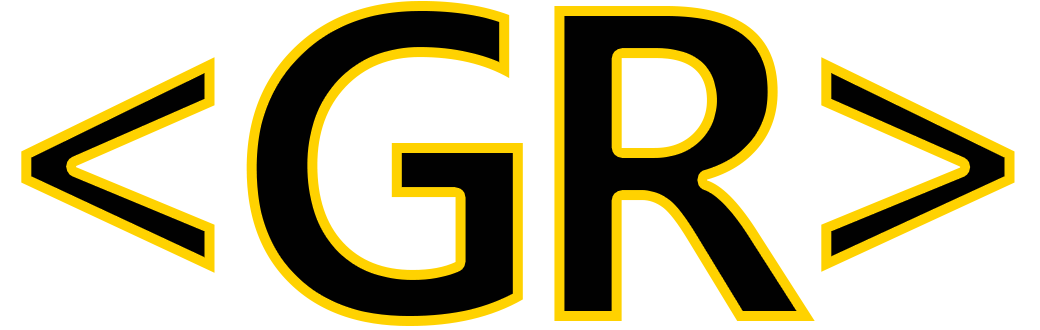
<style>
.page{position:relative;width:1040px;height:330px;background:#ffffff}
.page>*{position:absolute;margin:0}
.t1{font:416.7px "MicrosoftYaHeiUI-Bold";letter-spacing:-0.075em;color:#010101}
.t2{font:395.8px "MicrosoftYaHeiUI-Bold"}
</style>
<div class="page">
<p class="t1" style="left:246px;top:1px;width:569px;height:325px">GR</p>
<p class="t2" style="left:821px;top:57px;width:194px;height:215px">&gt;</p>
</div>
